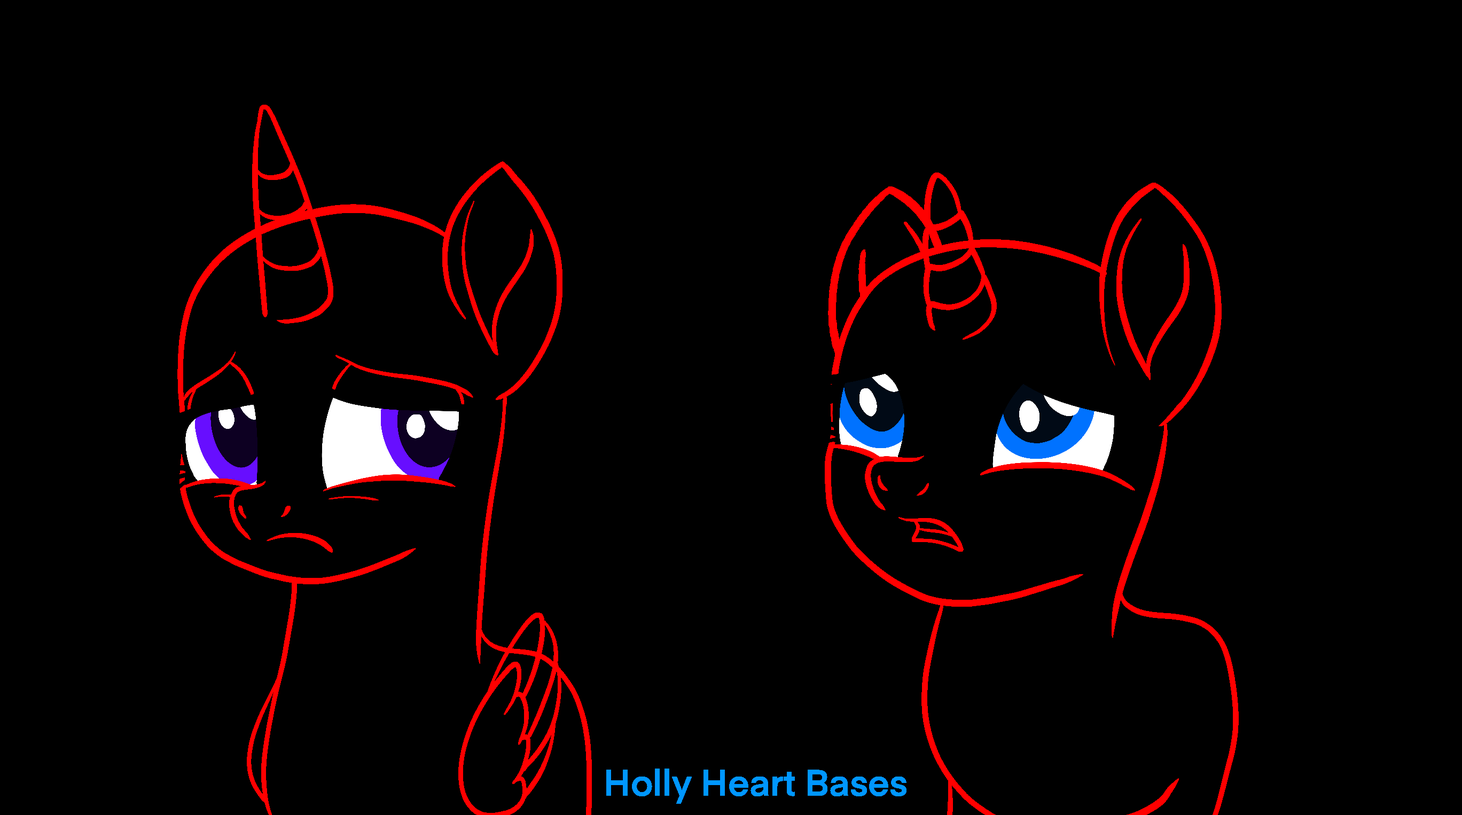
<style>
.page{position:relative;width:1462px;height:815px;background:#000000}
.page>*{position:absolute;margin:0}
.t1{font:36.2px "Eina01-SemiBold";color:#0097ff}
</style>
<div class="page">
<p class="t1" style="left:0px;top:0px;width:1462px;height:815px;text-align:center">Holly Heart Bases</p>
</div>
